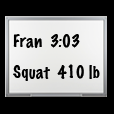
<style>
.page{position:relative;width:114px;height:114px;background:#000000}
.page>*{position:absolute;margin:0}
.t1{font:16px "MarkerFelt-Thin";color:#000000}
</style>
<div class="page">
<p class="t1" style="left:13px;top:34px;width:67px;height:14px">Fran  3:03</p>
<p class="t1" style="left:13px;top:64px;width:87px;height:17px">Squat  410 lb</p>
</div>
